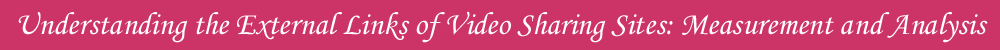
<style>
.page{position:relative;width:1000px;height:50px;background:#cc3366}
.page>*{position:absolute;margin:0}
.t1{font:32px "MonotypeCorsiva";color:#fffefe}
</style>
<div class="page">
<p class="t1" style="left:18px;top:11px;width:970px;height:32px">Understanding the External Links of Video Sharing Sites: Measurement and Analysis</p>
</div>
